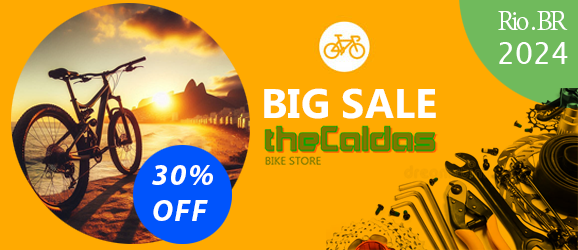
<style>
.page{position:relative;width:578px;height:250px;background:#ffaa01}
.page>*{position:absolute;margin:0}
.t1{font:30px "AdobeDevanagari-Regular";letter-spacing:-0.1em;color:#ffffff}
.t2{font:30px "LucidaConsole";color:#ffffff}
.t3{font:41.3px "MicrosoftPhagsPa-Bold";color:#ffffff}
.t4{font:30px "MyriadPro-BoldIt";letter-spacing:0.06em;color:#ffffff}
.t5{font:30px "MyriadPro-BoldIt";letter-spacing:0.05em;color:#ffffff}
</style>
<div class="page">
<p class="t1" style="left:498px;top:11px;width:70px;height:19px">Rio . BR</p>
<p class="t2" style="left:499px;top:42px;width:69px;height:22px">2024</p>
<p class="t3" style="left:264px;top:88px;width:172px;height:31px">BIG SALE</p>
<p class="t4" style="left:152px;top:165px;width:61px;height:56px">30%<br><span class="t5">OFF</span></p>
</div>
